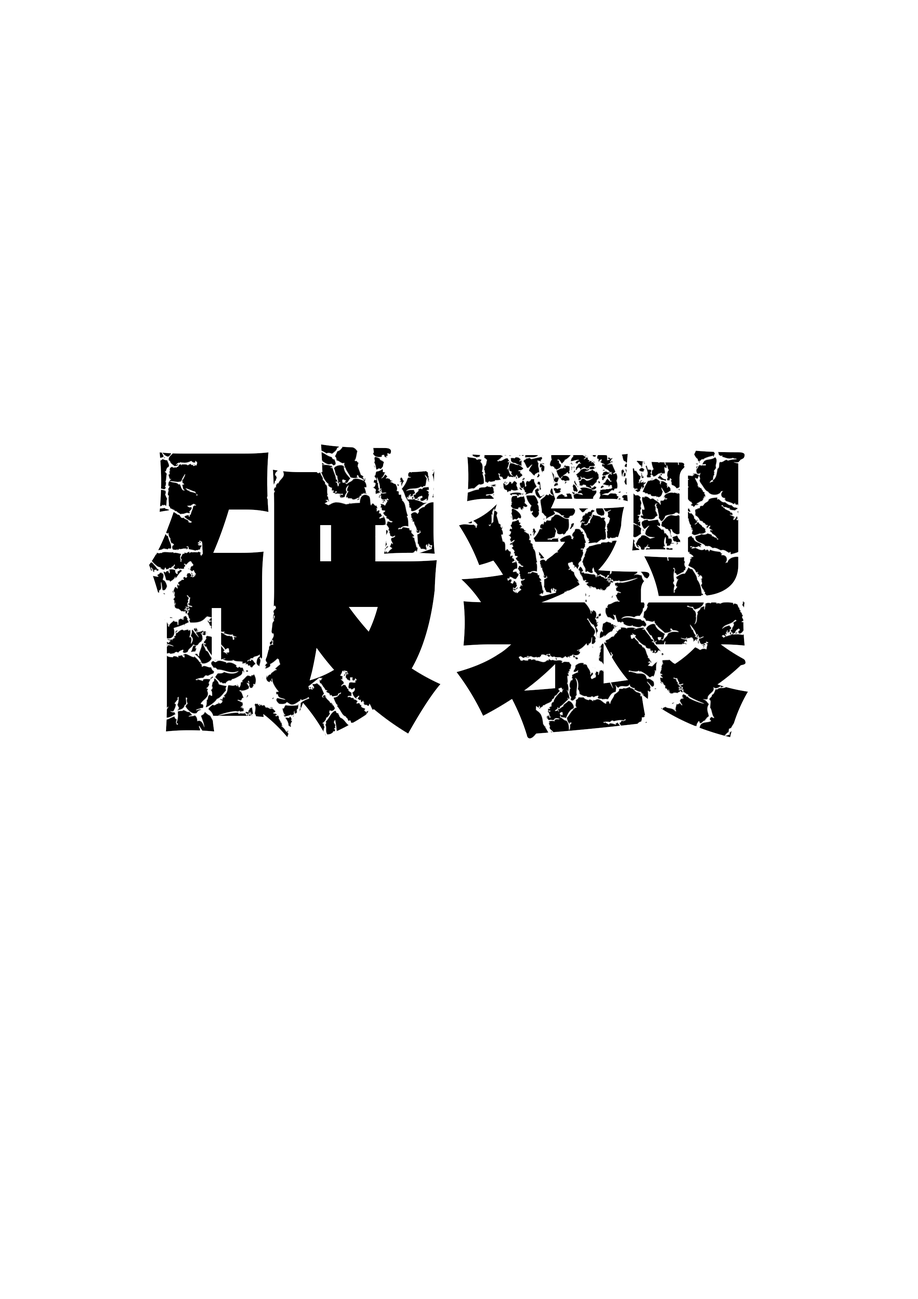
<style>
.page{position:relative;width:918px;height:1299px;background:#ffffff}
.page>*{position:absolute;margin:0}
.t1{font:308.5px "DFHei-W12-WIN-BF";color:#000000}
</style>
<div class="page">
<p class="t1" style="left:149px;top:444px;width:599px;height:295px">破裂</p>
</div>
